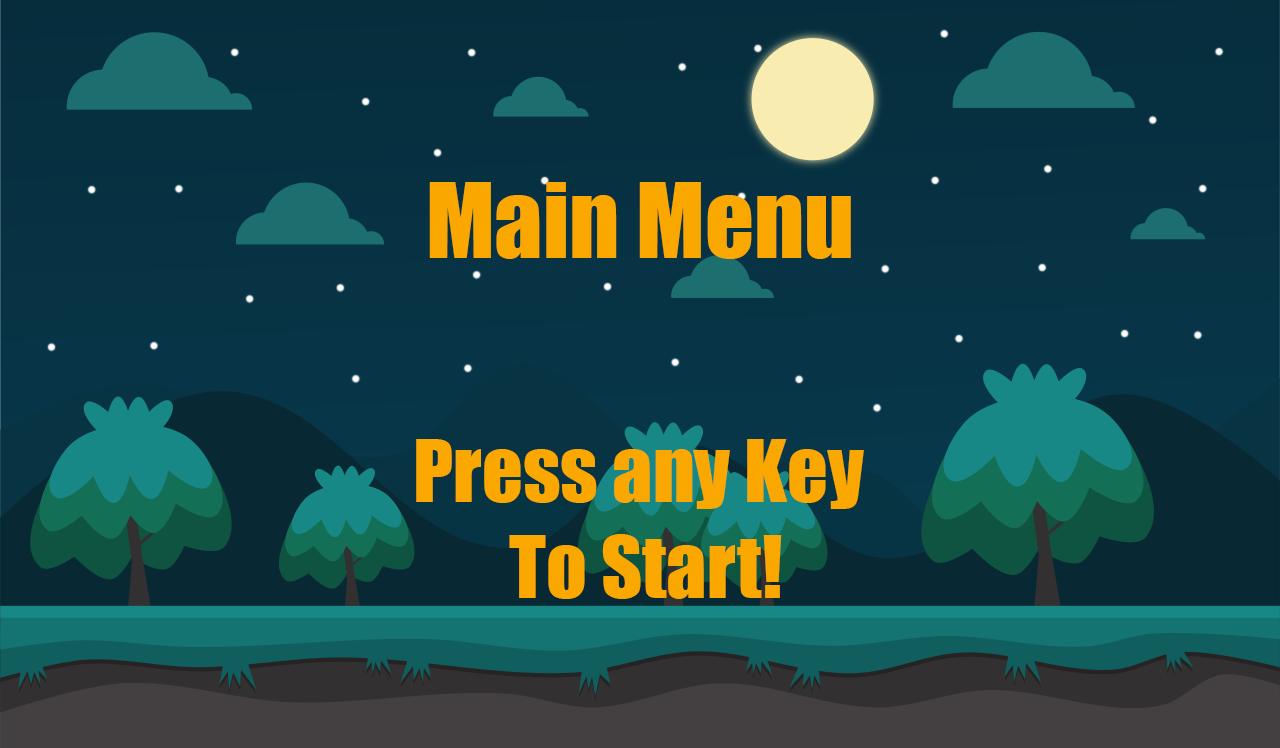
<style>
.page{position:relative;width:1280px;height:748px}
.page>*{position:absolute;margin:0}
.t1{font:96px "Impact";color:#faa700}
.t2{font:80px "Impact";color:#faa700}
</style>
<div class="page">
<p class="t1" style="left:429px;top:182px;width:422px;height:77px">Main Menu</p>
<p class="t2" style="left:416px;top:439px;width:448px;height:160px;text-align:center">Press any Key <br>To Start!</p>
</div>
